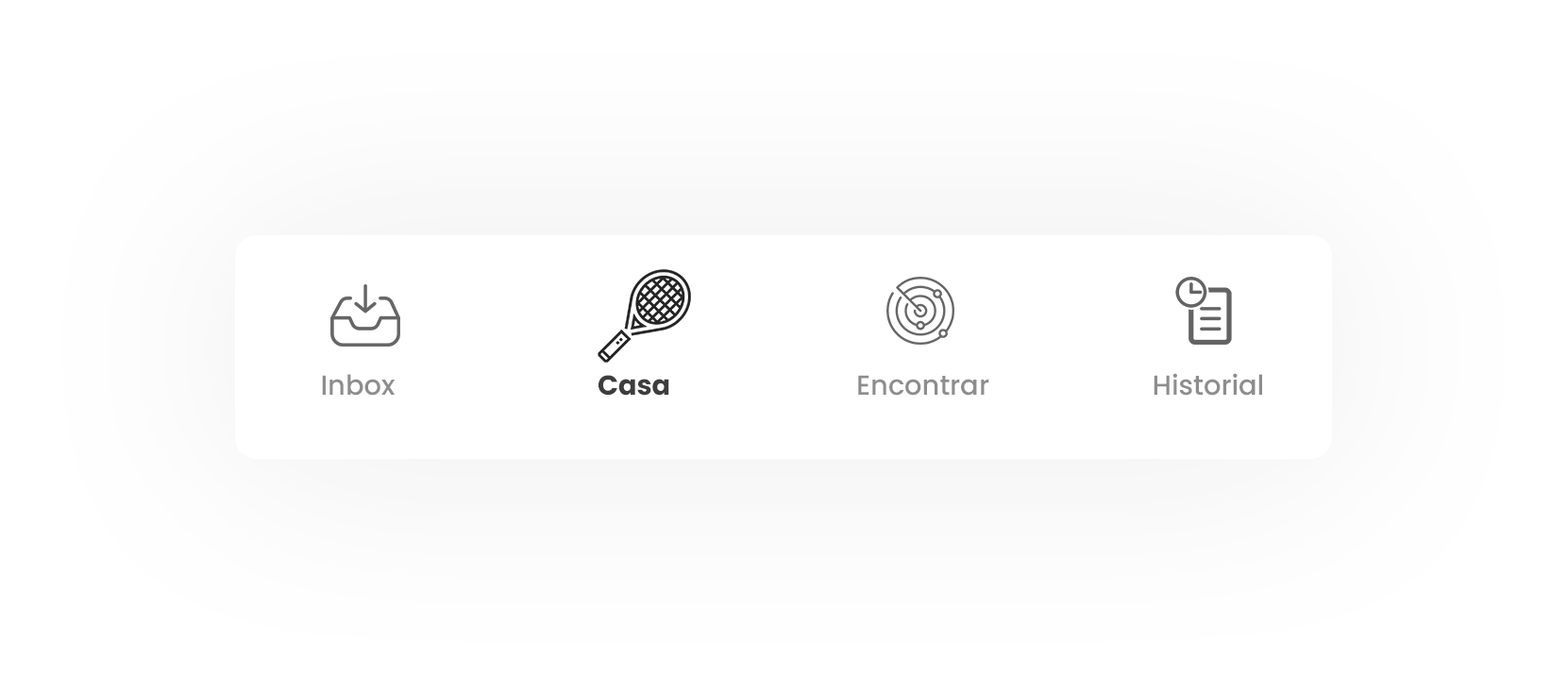
<style>
.page{position:relative;width:1568px;height:695px;background:#ffffff}
.page>*{position:absolute;margin:0}
.t1{font:27.4px "Poppins-Medium";color:#8d8d8d}
.t2{font:27.4px "Poppins-Bold";color:#3d3d3d}
</style>
<div class="page">
<p class="t1" style="left:322px;top:374px;width:73px;height:22px">Inbox</p>
<p class="t2" style="left:599px;top:375px;width:70px;height:21px">Casa</p>
<p class="t1" style="left:858px;top:375px;width:131px;height:21px">Encontrar</p>
<p class="t1" style="left:1154px;top:373px;width:108px;height:23px">Historial</p>
</div>
